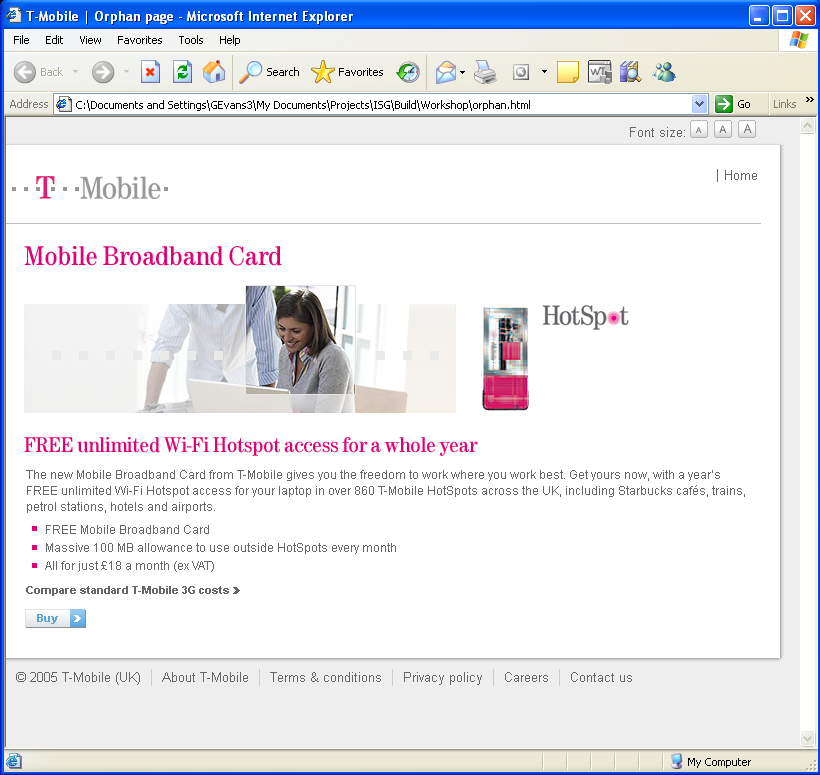
<style>
.page{position:relative;width:820px;height:775px;background:#ffffff}
.page>*{position:absolute;margin:0}
.t1{font:28px "Tele-Antiqua";color:#e20074}
.t2{font:22px "Tele-Antiqua";color:#e20074}
.t3{font:12px/16px "ArialMT";color:#666666}
.t4{font:12px/18px "ArialMT";color:#666666}
.t5{font:11px "Arial-BoldMT";color:#666666}
</style>
<div class="page">
<p class="t1" style="left:24px;top:246px;width:258px;height:20px">Mobile Broadband Card</p>
<p class="t2" style="left:24px;top:437px;width:454px;height:19px">FREE unlimited Wi-Fi Hotspot access for a whole year</p>
<p class="t3" style="left:26px;top:470px;width:719px;height:43px">The new Mobile Broadband Card from T-Mobile gives you the freedom to work where you work best. Get yours now, with a year’s FREE unlimited Wi-Fi Hotspot access for your laptop in over 860 T-Mobile HotSpots across the UK, including Starbucks cafés, trains, petrol stations, hotels and airports.</p>
<p class="t4" style="left:45px;top:525px;width:351px;height:47px">FREE Mobile Broadband Card<br>Massive 100 MB allowance to use outside HotSpots every month<br>All for just £18 a month (ex VAT)</p>
<p class="t5" style="left:26px;top:586px;width:203px;height:10px">Compare standard T-Mobile 3G costs</p>
</div>
